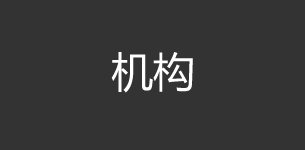
<style>
.page{position:relative;width:305px;height:150px;background:#333333}
.page>*{position:absolute;margin:0}
.t1{font:41.7px "MicrosoftYaHei";color:#ffffff}
</style>
<div class="page">
<p class="t1" style="left:111px;top:52px;width:82px;height:41px">机构</p>
</div>
